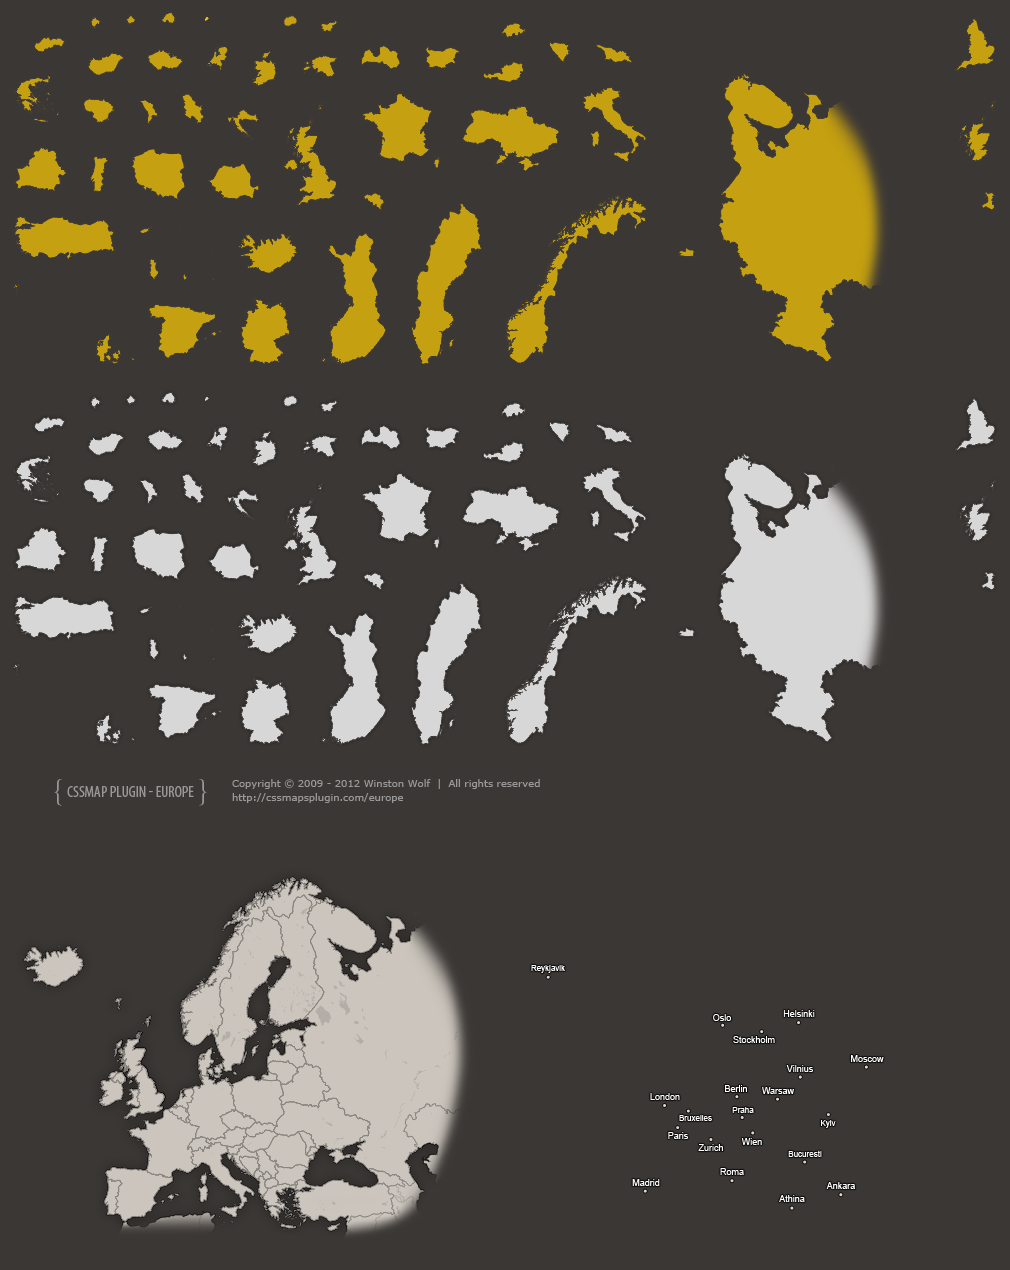
<style>
.page{position:relative;width:1010px;height:1270px;background:#3b3735}
.page>*{position:absolute;margin:0}
.t1{font:8px "ArialMT";color:#ffffff}
.t2{font:9px "ArialMT";color:#ffffff}
</style>
<div class="page">
<p class="t1" style="left:531px;top:965px;width:34px;height:8px">Reykjavik</p>
<p class="t2" style="left:713px;top:1014px;width:18px;height:7px">Oslo</p>
<p class="t2" style="left:783px;top:1010px;width:32px;height:7px">Helsinki</p>
<p class="t2" style="left:733px;top:1036px;width:42px;height:7px">Stockholm</p>
<p class="t2" style="left:851px;top:1055px;width:33px;height:7px">Moscow</p>
<p class="t2" style="left:786px;top:1065px;width:28px;height:7px">Vilnius</p>
<p class="t2" style="left:725px;top:1085px;width:22px;height:7px">Berlin</p>
<p class="t2" style="left:650px;top:1093px;width:30px;height:7px">London</p>
<p class="t2" style="left:762px;top:1087px;width:32px;height:7px">Warsaw</p>
<p class="t1" style="left:732px;top:1107px;width:22px;height:6px">Praha</p>
<p class="t1" style="left:679px;top:1115px;width:33px;height:6px">Bruxelles</p>
<p class="t1" style="left:821px;top:1120px;width:15px;height:8px">Kyiv</p>
<p class="t2" style="left:668px;top:1132px;width:21px;height:7px">Paris</p>
<p class="t2" style="left:698px;top:1144px;width:25px;height:7px">Zurich</p>
<p class="t2" style="left:741px;top:1138px;width:21px;height:7px">Wien</p>
<p class="t1" style="left:788px;top:1150px;width:34px;height:7px">Bucuresti</p>
<p class="t2" style="left:720px;top:1168px;width:24px;height:7px">Roma</p>
<p class="t2" style="left:632px;top:1179px;width:28px;height:7px">Madrid</p>
<p class="t2" style="left:826px;top:1182px;width:29px;height:7px">Ankara</p>
<p class="t2" style="left:779px;top:1195px;width:26px;height:7px">Athina</p>
</div>
